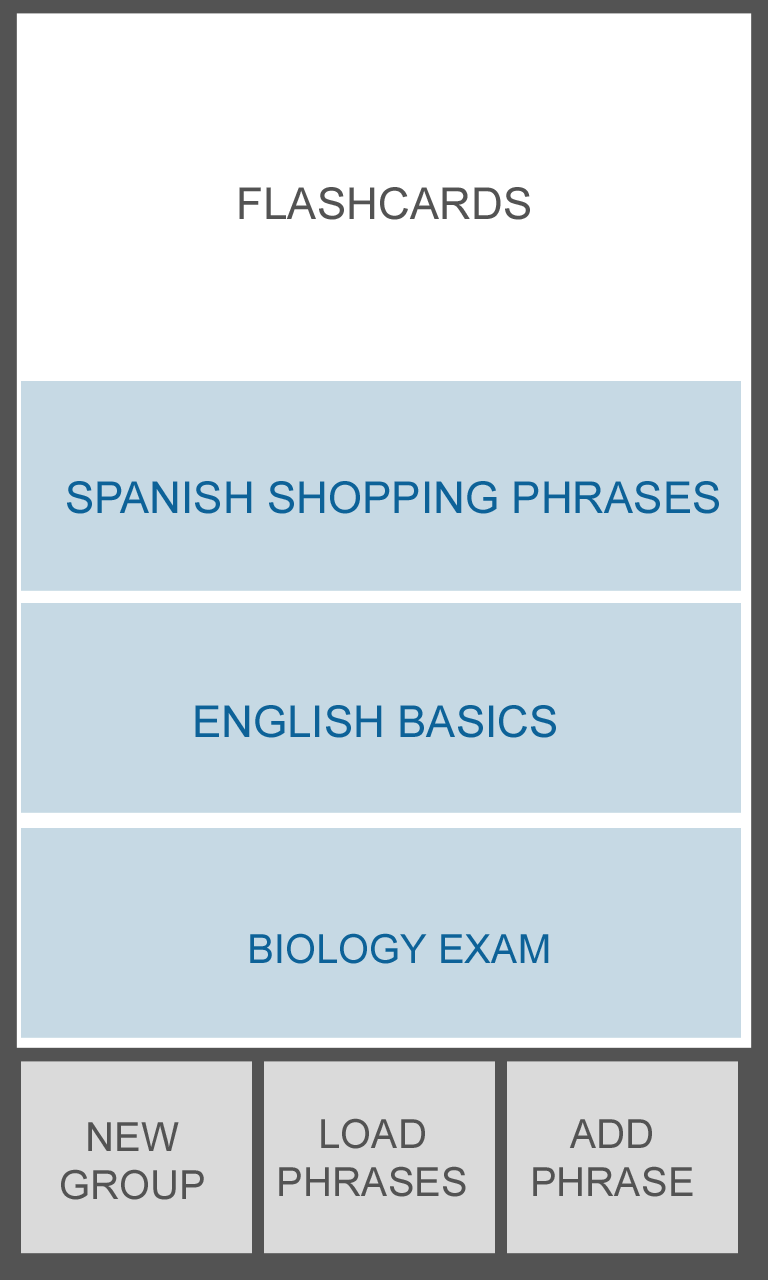
<style>
.page{position:relative;width:768px;height:1280px;background:#c6d9e4}
.page>*{position:absolute;margin:0}
.t1{font:44px "ArialMT";color:#535353}
.t2{font:44px "ArialMT";color:#0d6298}
.t3{font:40px "ArialMT";color:#0d6298}
.t4{font:40px "ArialMT";color:#535353}
</style>
<div class="page">
<p class="t1" style="left:239px;top:187px;width:291px;height:33px">FLASHCARDS</p>
<p class="t2" style="left:67px;top:481px;width:652px;height:33px">SPANISH SHOPPING PHRASES</p>
<p class="t2" style="left:195px;top:705px;width:361px;height:33px">ENGLISH BASICS</p>
<p class="t3" style="left:250px;top:933px;width:299px;height:31px">BIOLOGY EXAM</p>
<p class="t4" style="left:279px;top:1118px;width:187px;height:79px;text-align:center">LOAD<br>PHRASES</p>
<p class="t4" style="left:533px;top:1119px;width:160px;height:78px;text-align:center">ADD<br>PHRASE</p>
<p class="t4" style="left:61px;top:1122px;width:143px;height:78px;text-align:center">NEW<br>GROUP</p>
</div>
